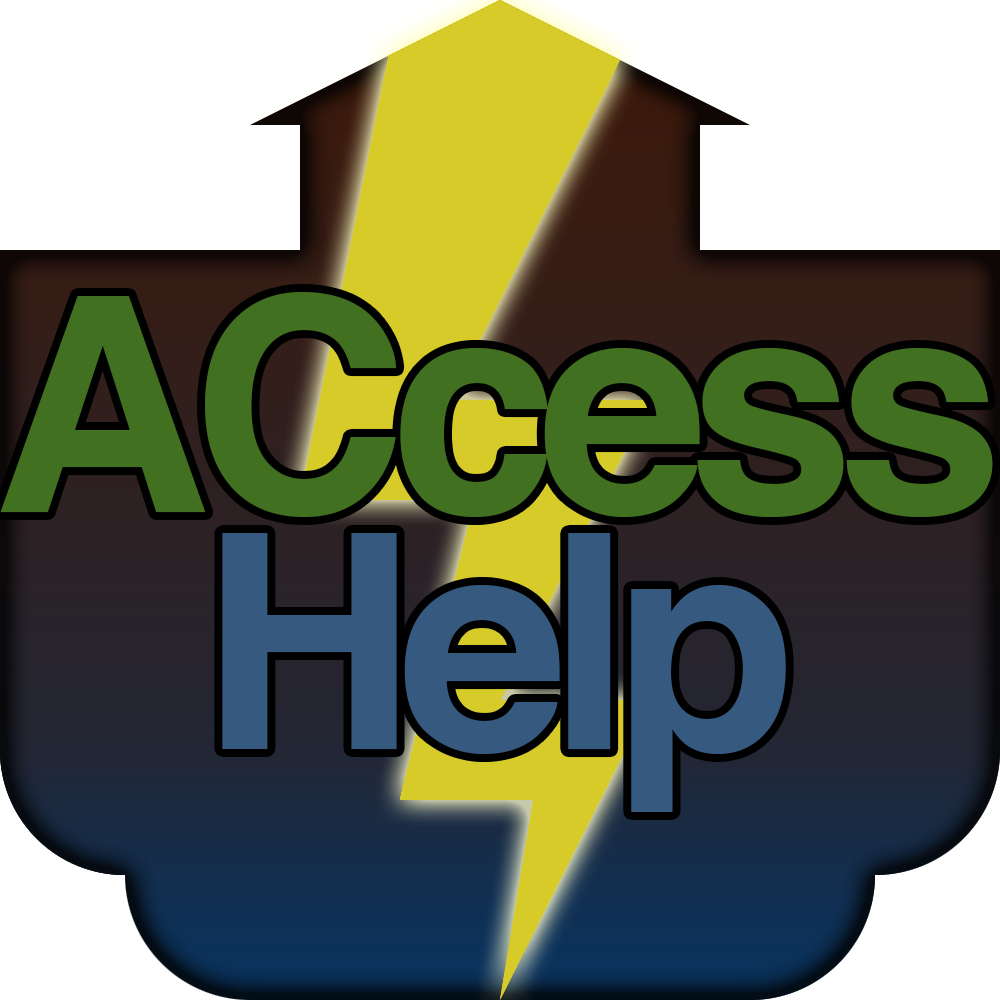
<style>
.page{position:relative;width:1000px;height:1000px;background:#ffffff}
.page>*{position:absolute;margin:0}
.t1{font:300px/237px "Helvetica-Bold";letter-spacing:-0.06em;color:#417021}
.t2{font:300px/237px "Helvetica-Bold";letter-spacing:-0.06em;color:#365a7f}
</style>
<div class="page">
<p class="t1" style="left:0px;top:292px;width:993px;height:520px;text-align:center">ACcess<br><span class="t2">Help</span></p>
</div>
